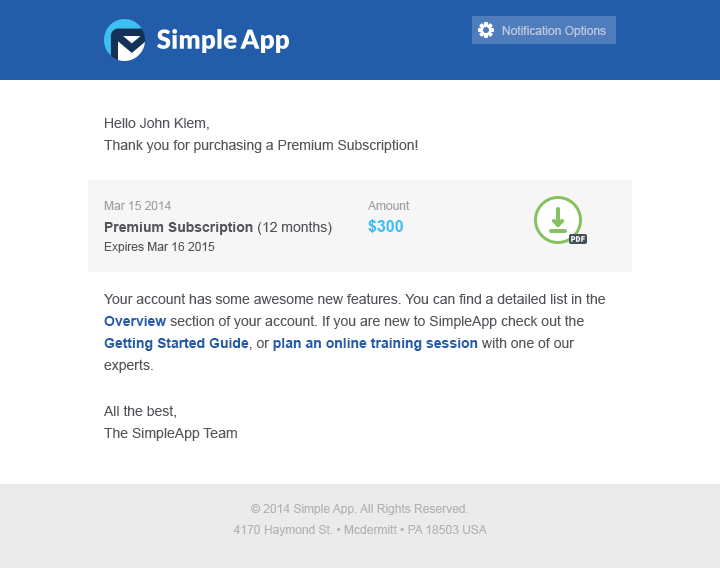
<style>
.page{position:relative;width:720px;height:568px;background:#ffffff}
.page>*{position:absolute;margin:0}
.t1{font:12px "ArialMT";color:#bcc8df}
.t2{font:14px/22px "ArialMT";color:#54565c}
.t3{font:14px "Arial-BoldMT";color:#54565c}
.t4{font:12px "ArialMT";color:#a1a2a5}
.t5{font:14px "ArialMT";color:#54565c}
.t6{font:12px "ArialMT";color:#54565c}
.t7{font:16px "Arial-BoldMT";color:#3cbff3}
.t8{font:8px "FiraMono-Bold";color:#ffffff}
.t9{font:14px/22px "Arial-BoldMT";color:#235daa}
.t10{font:12px/21px "ArialMT";color:#b3b3b3}
</style>
<div class="page">
<p class="t1" style="left:502px;top:26px;width:104px;height:11px">Notification Options</p>
<p class="t2" style="left:104px;top:118px;width:314px;height:35px">Hello John Klem,<br>Thank you for purchasing a Premium Subscription!</p>
<p class="t3" style="left:104px;top:201px;width:228px;height:52px"><span class="t4">Mar 15 2014<br></span>Premium Subscription <span class="t5">(12 months)<br></span><span class="t6">Expires Mar 16 2015</span></p>
<p class="t4" style="left:368px;top:201px;width:42px;height:32px">Amount<br><span class="t7">$300</span></p>
<p class="t8" style="left:571px;top:236px;width:14px;height:6px">PDF</p>
<p class="t2" style="left:104px;top:293px;width:501px;height:148px">Your account has some awesome new features. You can find a detailed list in the <span class="t9">Overview </span>section of your account. If you are new to SimpleApp check out the <span class="t9">Getting Started Guide</span>, or <span class="t9">plan an online training session</span> with one of our experts.<br>All the best,<br>The SimpleApp Team</p>
<p class="t10" style="left:233px;top:504px;width:254px;height:32px;text-align:center">© 2014 Simple App. All Rights Reserved.<br>4170 Haymond St. • Mcdermitt • PA 18503 USA</p>
</div>
